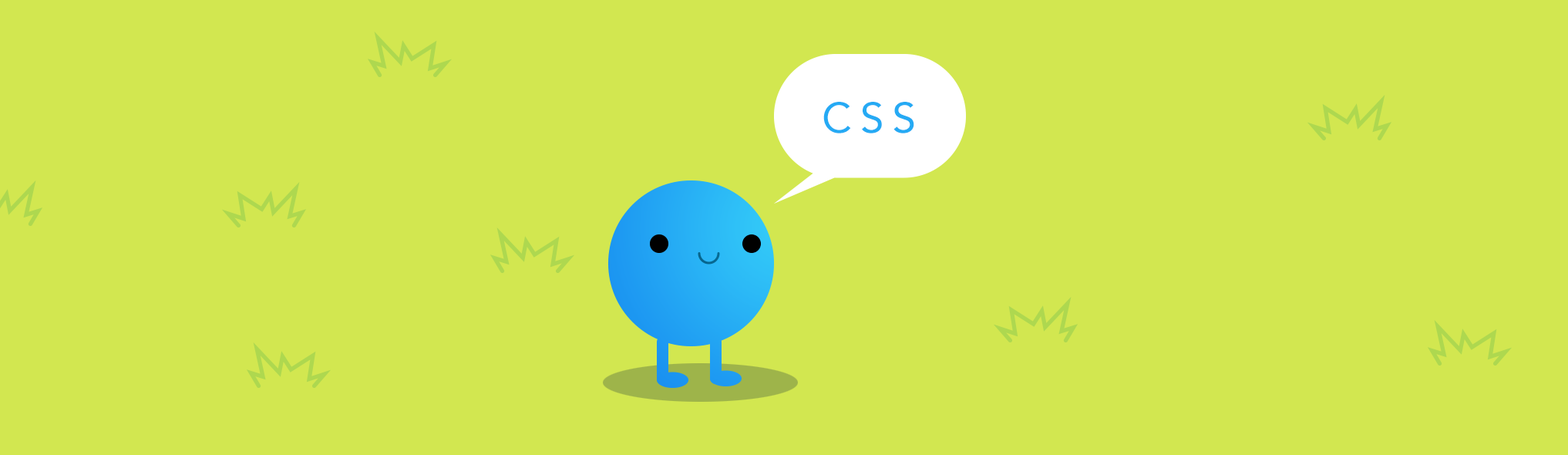
<style>
.page{position:relative;width:1568px;height:455px;background:#d2e750}
.page>*{position:absolute;margin:0}
.t1{font:42.3px "Avenir-Roman";letter-spacing:0.2em;color:#25aaf4}
</style>
<div class="page">
<p class="t1" style="left:823px;top:102px;width:91px;height:31px">CSS</p>
</div>
